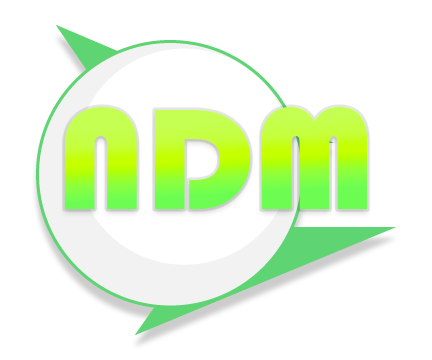
<style>
.page{position:relative;width:432px;height:360px;background:#ffffff}
.page>*{position:absolute;margin:0}
.t1{font:149px "Bauhaus93"}
</style>
<div class="page">
<p class="t1" style="left:64px;top:107px;width:304px;height:103px">NDM</p>
</div>
